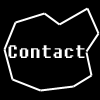
<style>
.page{position:relative;width:100px;height:100px;background:#000000}
.page>*{position:absolute;margin:0}
.t1{font:18px "Fixedsys";color:#ffffff}
</style>
<div class="page">
<p class="t1" style="left:8px;top:45px;width:77px;height:13px">Contact</p>
</div>
